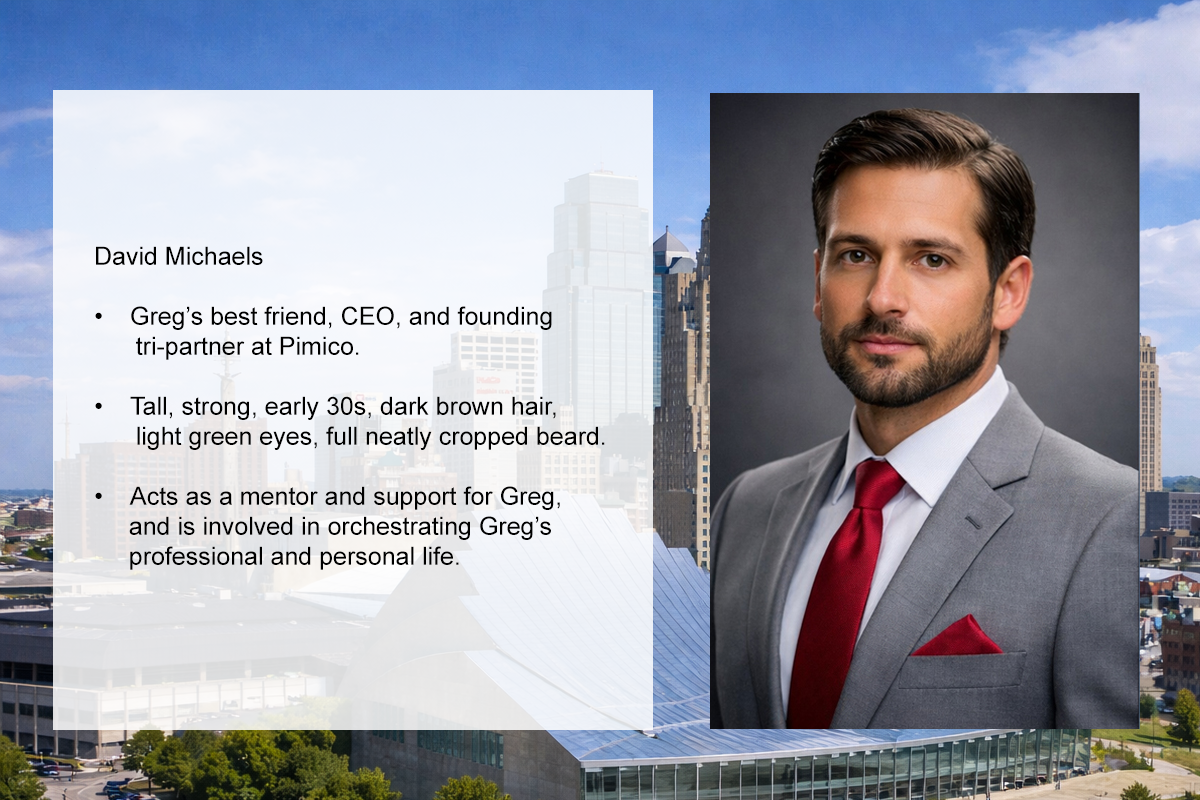
<style>
.page{position:relative;width:1200px;height:800px}
.page>*{position:absolute;margin:0}
.t1{font:25px "ArialMT";color:#000000}
</style>
<div class="page">
<p class="t1" style="left:95px;top:246px;width:510px;height:324px">David Michaels<br><br>• Greg’s best friend, CEO, and founding <br>      tri-partner at Pimico.<br><br>• Tall, strong, early 30s, dark brown hair, <br>      light green eyes, full neatly cropped beard.<br><br>• Acts as a mentor and support for Greg, <br>     and is involved in orchestrating Greg’s <br>     professional and personal life.</p>
</div>
